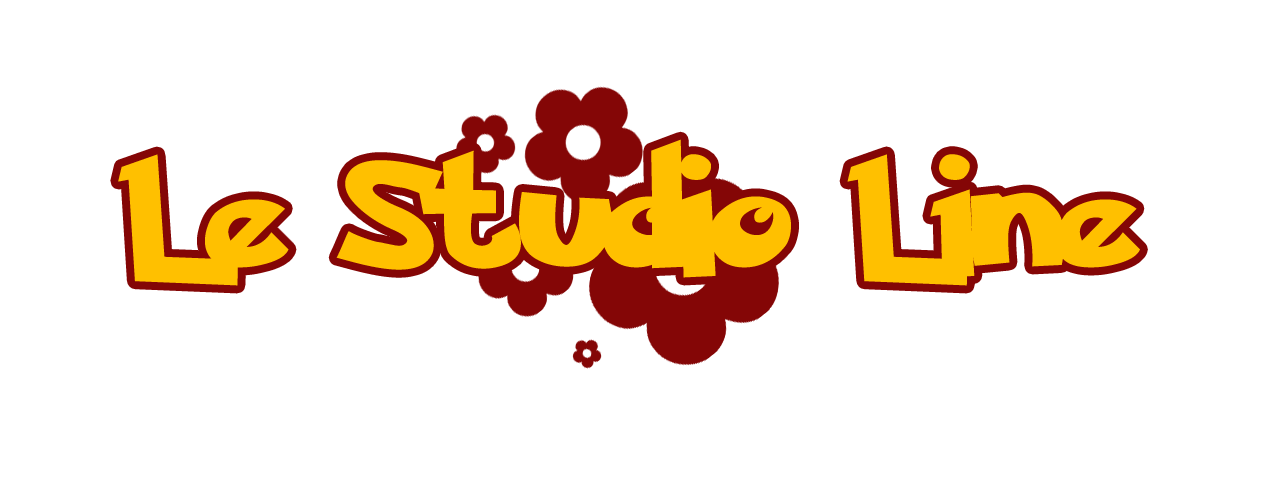
<style>
.page{position:relative;width:1280px;height:480px;background:#ffffff}
.page>*{position:absolute;margin:0}
.t1{font:173px "PokemonNormal";color:#ffc000}
</style>
<div class="page">
<p class="t1" style="left:118px;top:139px;width:1022px;height:147px">Le Studio Line</p>
</div>
